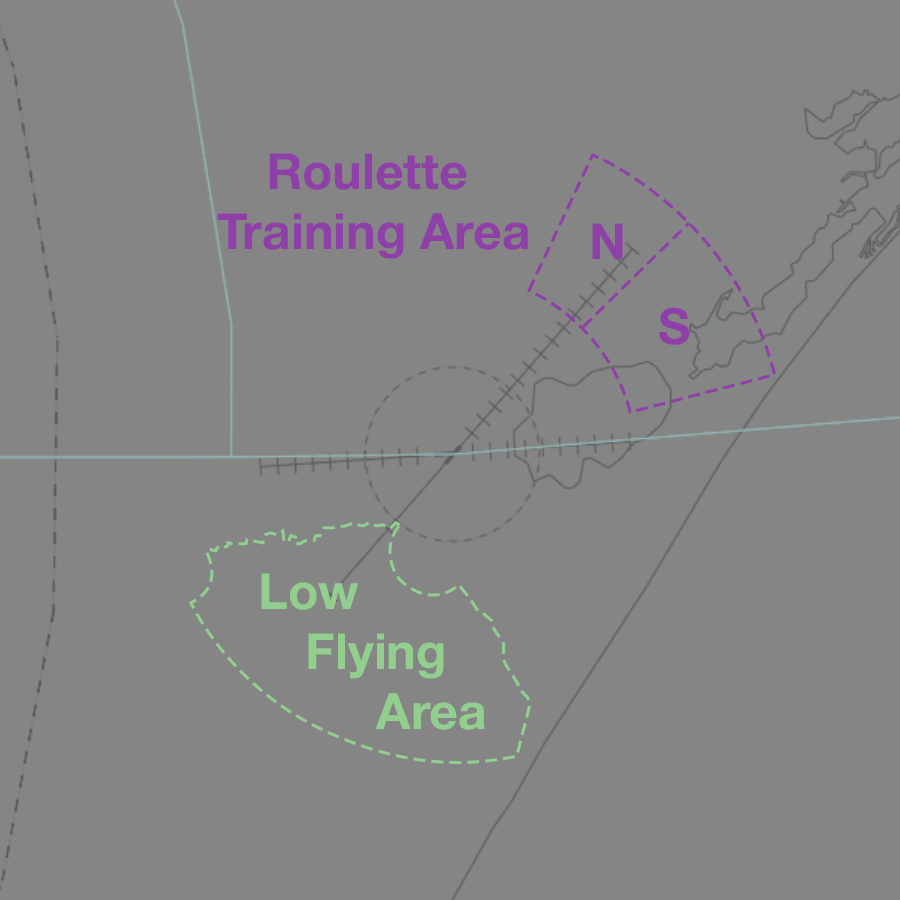
<style>
.page{position:relative;width:900px;height:900px;background:#858585}
.page>*{position:absolute;margin:0}
.t1{font:50px "HelveticaNeue-Bold";color:#8e3fa8}
.t2{font:50px "HelveticaNeue-Bold";color:#92cf8f}
</style>
<div class="page">
<p class="t1" style="left:217px;top:153px;width:312px;height:106px;text-align:center">Roulette <br>Training Area</p>
<p class="t1" style="left:592px;top:223px;width:31px;height:36px">N</p>
<p class="t1" style="left:659px;top:307px;width:31px;height:38px">S</p>
<p class="t2" style="left:261px;top:573px;width:224px;height:157px;text-align:center">Low Flying Area</p>
</div>
